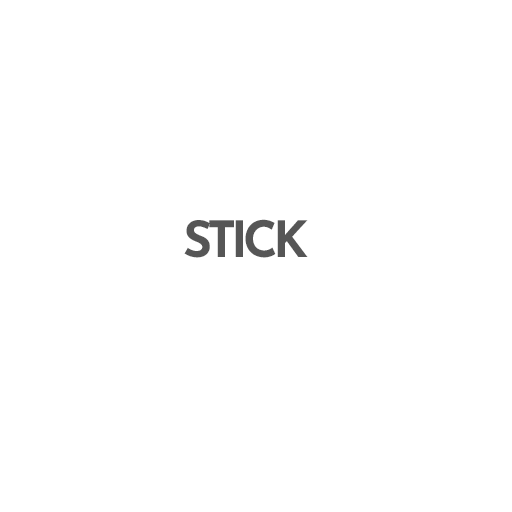
<style>
.page{position:relative;width:512px;height:512px;background:#ffffff}
.page>*{position:absolute;margin:0}
.t1{font:50px "JosefinSans-Bold";letter-spacing:-0.1em;color:#565656;font-variant:small-caps}
</style>
<div class="page">
<p class="t1" style="left:184px;top:219px;width:124px;height:39px">STICK</p>
</div>
